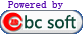
<style>
.page{position:relative;width:83px;height:34px;background:#ffffff}
.page>*{position:absolute;margin:0}
.t1{font:11px "SimSun";color:#5507ae}
.t2{font:16px "MicrosoftYaHei";color:#094433}
</style>
<div class="page">
<p class="t1" style="left:8px;top:1px;width:55px;height:8px">Powered by</p>
<p class="t2" style="left:25px;top:15px;width:51px;height:14px">bc soft</p>
</div>
